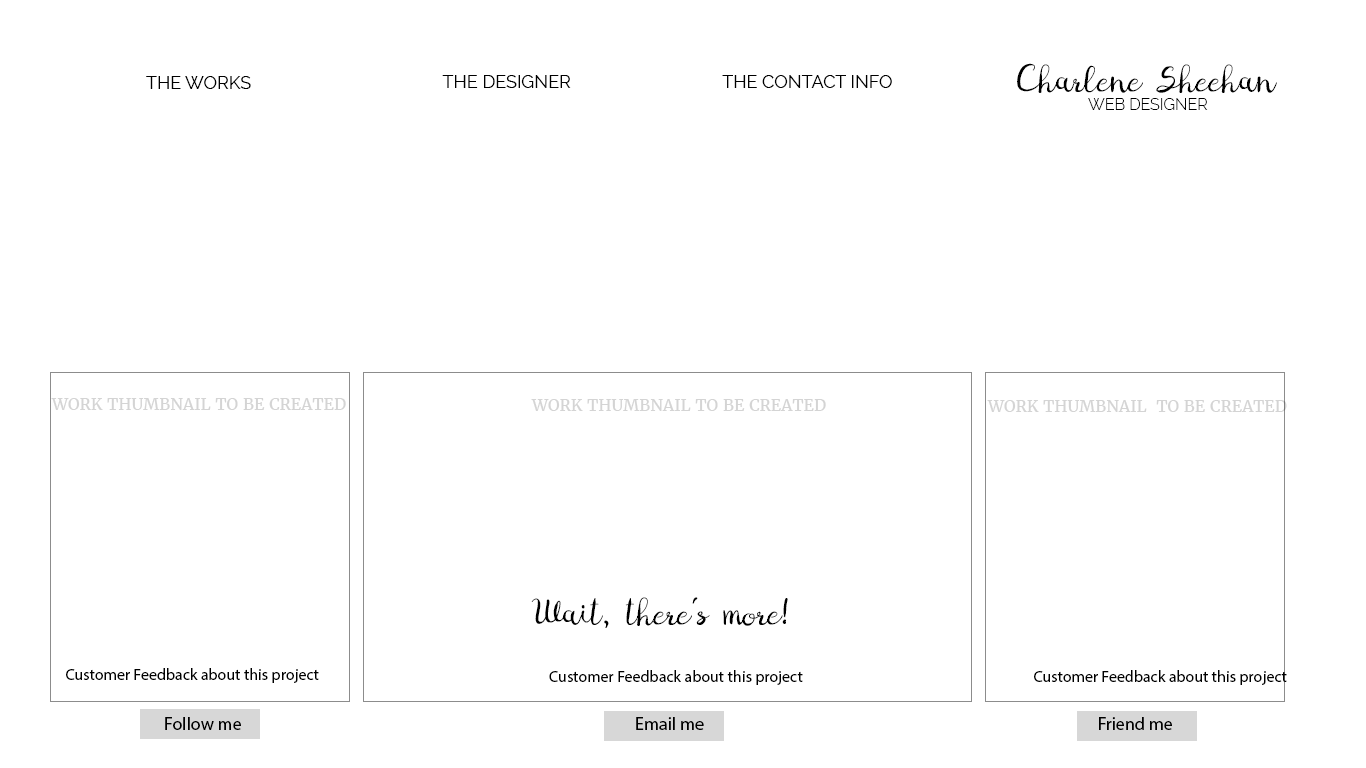
<style>
.page{position:relative;width:1366px;height:768px;background:#ffffff}
.page>*{position:absolute;margin:0}
.t1{font:18px "Digory_Doodles_PS";color:#000000}
.t2{font:18px "Raleway-Regular";color:#000000;text-transform:uppercase}
.t3{font:16px "Raleway-Light";color:#000000;text-transform:uppercase}
.t4{font:16px "Merriweather-Regular";color:#d4d4d4}
.t5{font:12px "MyriadPro-Regular";color:#d4d4d4}
.t6{font:18px "MyriadPro-Regular";color:#d4d4d4}
.t7{font:16px "MyriadPro-Regular";color:#000000}
.t8{font:18px "MyriadPro-Regular";color:#000000}
</style>
<div class="page">
<p class="t1" style="left:1017px;top:63px;width:260px;height:30px">Charlene Sheehan</p>
<p class="t2" style="left:146px;top:76px;width:105px;height:13px">THE WORKS</p>
<p class="t2" style="left:442px;top:75px;width:129px;height:13px">THE DESIGNER</p>
<p class="t2" style="left:722px;top:75px;width:170px;height:13px">THE CONTACT INFO</p>
<p class="t3" style="left:1088px;top:98px;width:120px;height:12px">Web Designer</p>
<p class="t4" style="left:51px;top:398px;width:295px;height:12px"><span class="t5"><br></span>WORK THUMBNAIL TO BE CREATED</p>
<p class="t4" style="left:531px;top:399px;width:295px;height:12px">WORK THUMBNAIL TO BE CREATED</p>
<p class="t4" style="left:987px;top:400px;width:300px;height:12px"><span class="t6"><br></span>WORK THUMBNAIL  TO BE CREATED</p>
<p class="t1" style="left:531px;top:597px;width:257px;height:31px;text-align:center">Wait, there’s more!</p>
<p class="t7" style="left:66px;top:668px;width:253px;height:15px">Customer Feedback about this project</p>
<p class="t7" style="left:549px;top:670px;width:254px;height:15px">Customer Feedback about this project</p>
<p class="t7" style="left:1034px;top:670px;width:253px;height:15px">Customer Feedback about this project</p>
<p class="t8" style="left:165px;top:717px;width:76px;height:13px">Follow me</p>
<p class="t8" style="left:636px;top:717px;width:68px;height:13px">Email me</p>
<p class="t8" style="left:1099px;top:717px;width:73px;height:13px">Friend me</p>
</div>
